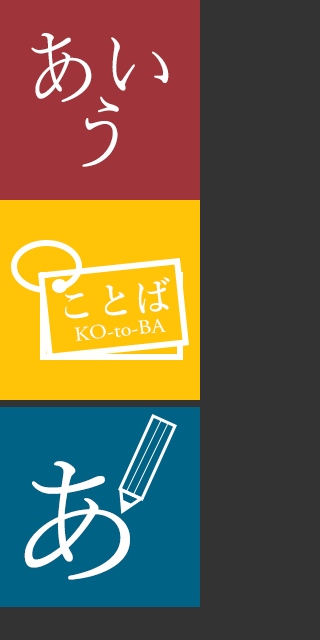
<style>
.page{position:relative;width:320px;height:640px;background:#333333}
.page>*{position:absolute;margin:0}
.t1{font:86.7px "YuMincho-Regular";color:#ffffff;scale:0.92 1}
.t2{font:86.4px "YuMincho-Regular";color:#ffffff;scale:0.92 1}
.t3{font:38.5px "YuMincho-Demibold";color:#ffffff}
.t4{font:20px "AGaramondPro-Regular";color:#ffffff;scale:1.1 1}
.t5{font:144px "YuMincho-Regular";color:#ffffff}
</style>
<div class="page">
<p class="t1" style="left:31px;top:33px;width:61px;height:69px;rotate:-10deg">あ</p>
<p class="t2" style="left:111px;top:37px;width:58px;height:54px;rotate:7deg">い</p>
<p class="t2" style="left:82px;top:96px;width:37px;height:71px;rotate:15deg">う</p>
<p class="t3" style="left:65px;top:277px;width:105px;height:42px;rotate:-6deg">ことば</p>
<p class="t4" style="left:74px;top:318px;width:92px;height:23px;rotate:-6deg">KO-to-BA</p>
<p class="t5" style="left:24px;top:461px;width:106px;height:119px">あ</p>
</div>
